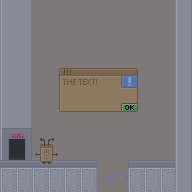
<style>
.page{position:relative;width:192px;height:192px;background:#7f7878}
.page>*{position:absolute;margin:0}
.t1{font:8px "MinionPro-Regular";color:#4d4234}
.t2{font:8px "Ebrima";color:#665745}
</style>
<div class="page">
<p class="t1" style="left:64px;top:69px;width:7px;height:6px">!!!</p>
<p class="t2" style="left:63px;top:79px;width:34px;height:6px">THE TEXT!</p>
</div>
